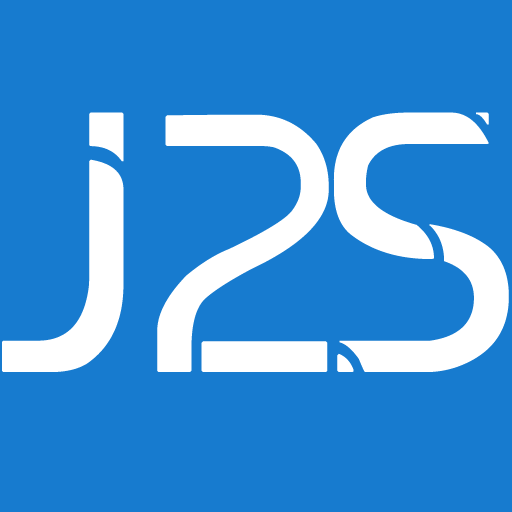
<style>
.page{position:relative;width:512px;height:512px;background:#177bcf}
.page>*{position:absolute;margin:0}
.t1{font:354.7px "Skynet.Enterprise";letter-spacing:-0.075em;color:#ffffff;text-transform:uppercase}
</style>
<div class="page">
<p class="t1" style="left:2px;top:112px;width:507px;height:260px">J2S</p>
</div>
